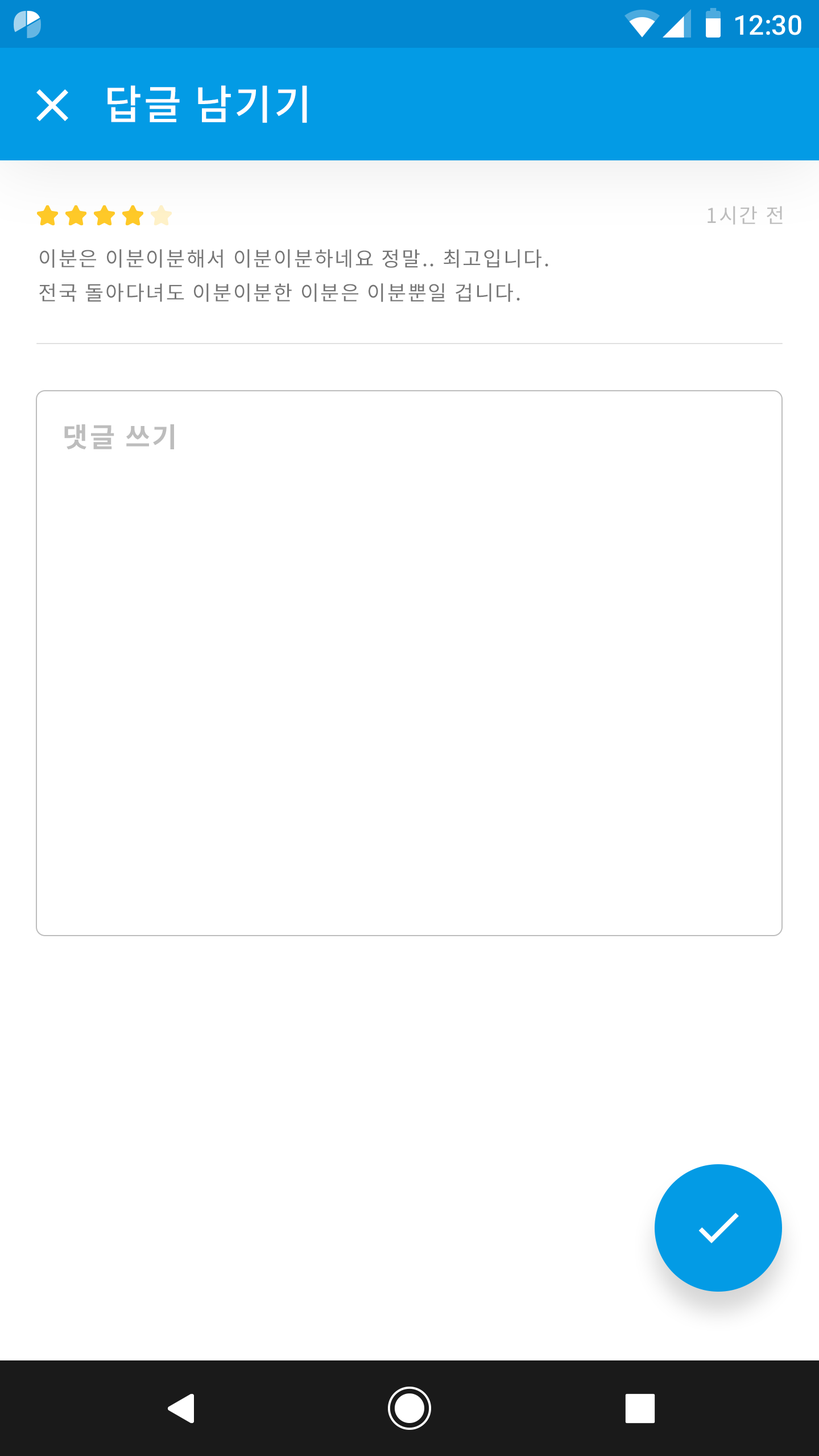
<style>
.page{position:relative;width:819px;height:1456px;background:#ffffff}
.page>*{position:absolute;margin:0}
.t1{font:27.3px "Roboto-Medium";color:#ffffff}
.t2{font:40.9px "NotoSansCJKkr-Medium";letter-spacing:0.05em;color:#ffffff}
.t3{font:20.5px "NotoSansCJKkr-Regular";letter-spacing:0.072em;color:#bdbdbd}
.t4{font:20.5px/34.1px "NotoSansCJKkr-Regular";letter-spacing:0.072em;color:#757575}
.t5{font:27.3px "NotoSansCJKkr-Bold";letter-spacing:0.072em;color:#bdbdbd}
</style>
<div class="page">
<p class="t1" style="left:735px;top:15px;width:66px;height:20px">12:30</p>
<p class="t2" style="left:107px;top:85px;width:200px;height:38px">답글 남기기</p>
<p class="t3" style="left:708px;top:206px;width:75px;height:19px">1시간 전</p>
<p class="t4" style="left:39px;top:249px;width:509px;height:53px">이분은 이분이분해서 이분이분하네요 정말.. 최고입니다.<br>전국 돌아다녀도 이분이분한 이분은 이분뿐일 겁니다.</p>
<p class="t5" style="left:64px;top:424px;width:110px;height:25px">댓글 쓰기</p>
</div>
